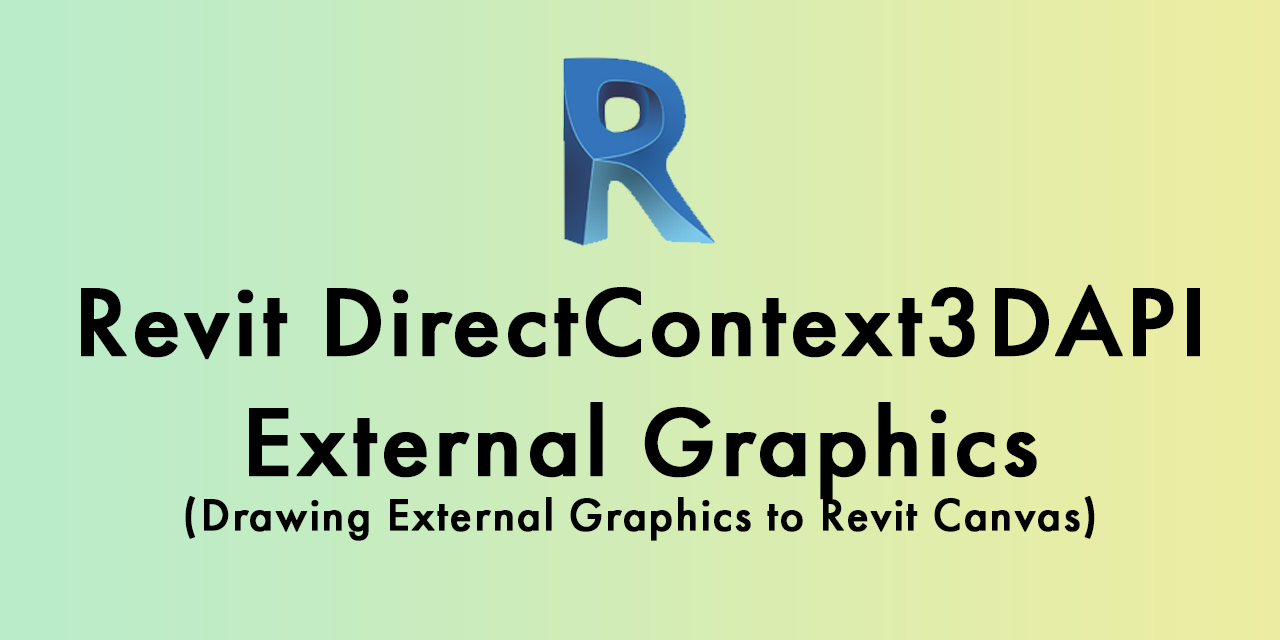
<style>
.page{position:relative;width:1280px;height:640px}
.page>*{position:absolute;margin:0}
.t1{font:45.8px "FuturaPT-Medium";letter-spacing:0.025em;color:#000000;font-weight:bold}
.t2{font:100px "FuturaPT-Medium";letter-spacing:0.025em;color:#000000;font-weight:bold}
</style>
<div class="page">
<p class="t1" style="left:81px;top:284px;width:1119px;height:257px;text-align:center"><span class="t2">Revit DirectContext3DAPI<br>External Graphics<br></span>(Drawing External Graphics to Revit Canvas)</p>
</div>
